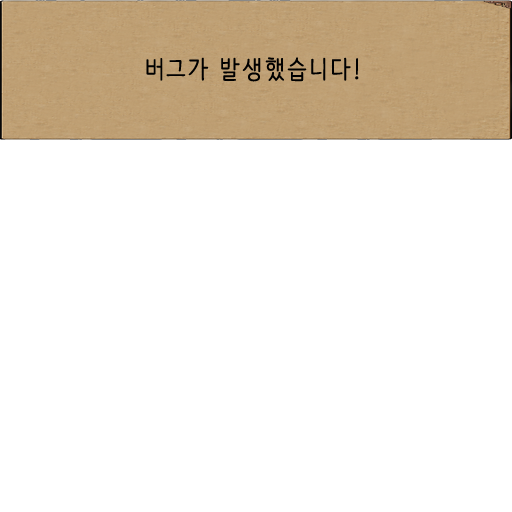
<style>
.page{position:relative;width:512px;height:512px;background:#ffffff}
.page>*{position:absolute;margin:0}
.t1{font:25px "NanumBarunpen";letter-spacing:0.075em;color:#000000;font-weight:bold}
</style>
<div class="page">
<p class="t1" style="left:146px;top:57px;width:213px;height:25px">버그가 발생했습니다!</p>
</div>
